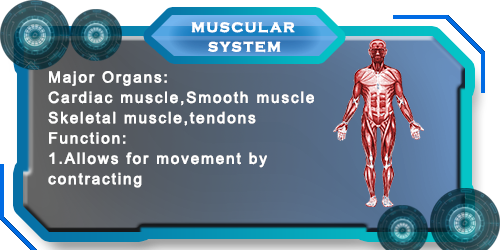
<style>
.page{position:relative;width:500px;height:250px}
.page>*{position:absolute;margin:0}
.t1{font:14px "CopperplateGothic-Bold";letter-spacing:0.1em;color:#ffffff;font-weight:bold}
.t2{font:15.2px/20.3px "ArialMT";letter-spacing:0.1em;color:#ffffff;font-weight:bold}
</style>
<div class="page">
<p class="t1" style="left:191px;top:22px;width:104px;height:11px">MUSCULAR</p>
<p class="t1" style="left:208px;top:41px;width:73px;height:12px">SYSTEM</p>
<p class="t2" style="left:48px;top:71px;width:266px;height:117px">Major Organs:<br>Cardiac muscle,Smooth muscle<br>Skeletal muscle,tendons <br>Function:<br>1.Allows for movement by       contracting</p>
</div>
